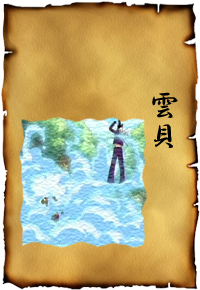
<style>
.page{position:relative;width:200px;height:290px}
.page>*{position:absolute;margin:0}
.t1{font:30px "HGPGyoshotai";color:#000000}
</style>
<div class="page">
<p class="t1" style="left:152px;top:92px;width:26px;height:56px;text-align:center">雲貝</p>
</div>
